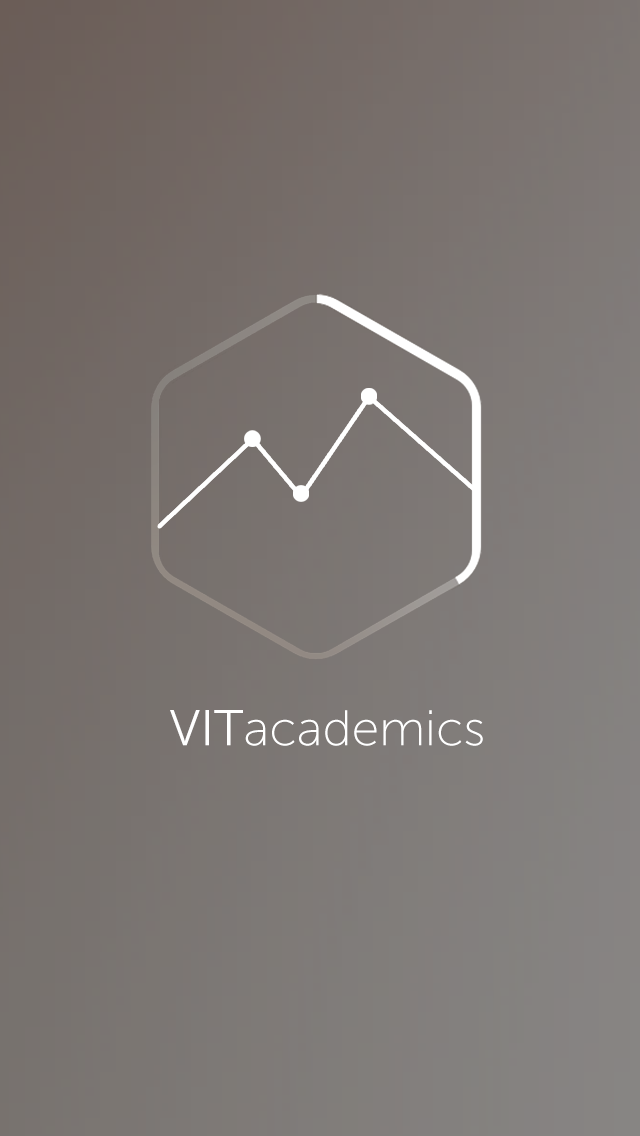
<style>
.page{position:relative;width:640px;height:1136px}
.page>*{position:absolute;margin:0}
.t1{font:50px "MuseoSans-100";color:#ffffff}
.t2{font:50px "MuseoSans-300";color:#ffffff}
</style>
<div class="page">
<p class="t1" style="left:170px;top:710px;width:313px;height:36px"><span class="t2">VIT</span>academics</p>
</div>
